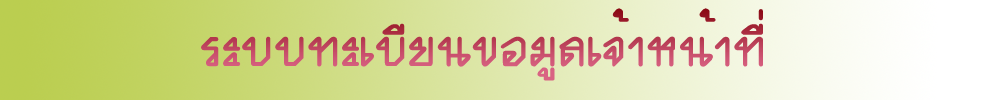
<style>
.page{position:relative;width:984px;height:100px}
.page>*{position:absolute;margin:0}
.t1{font:72px "DsSup";color:#c34965}
</style>
<div class="page">
<p class="t1" style="left:201px;top:8px;width:562px;height:73px">ÃÐºº·ÐàºÕÂ¹¢ÍÁÙÅà¨éÒË¹éÒ·Õè</p>
</div>
